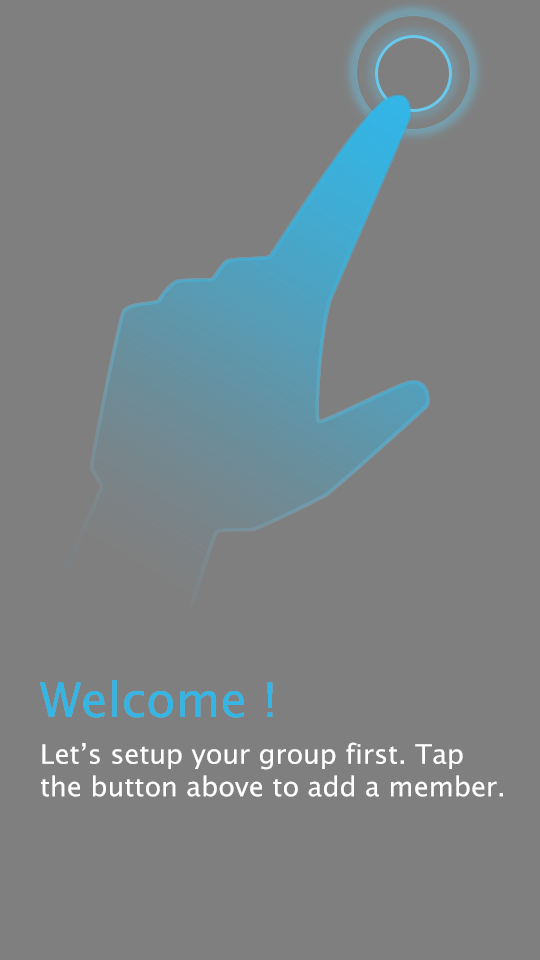
<style>
.page{position:relative;width:540px;height:960px;background:#7f7f7f}
.page>*{position:absolute;margin:0}
.t1{font:48px "LucidaSansUnicode";color:#33b5e5}
.t2{font:27px "LucidaSansUnicode";color:#ffffff}
</style>
<div class="page">
<p class="t1" style="left:40px;top:680px;width:233px;height:38px">Welcome !</p>
<p class="t2" style="left:41px;top:742px;width:462px;height:55px">Let’s setup your group first. Tap the button above to add a member.</p>
</div>
